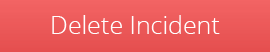
<style>
.page{position:relative;width:270px;height:52px}
.page>*{position:absolute;margin:0}
.t1{font:25px "OpenSans-Light";color:#ffffff}
</style>
<div class="page">
<p class="t1" style="left:52px;top:15px;width:168px;height:19px">Delete Incident</p>
</div>
